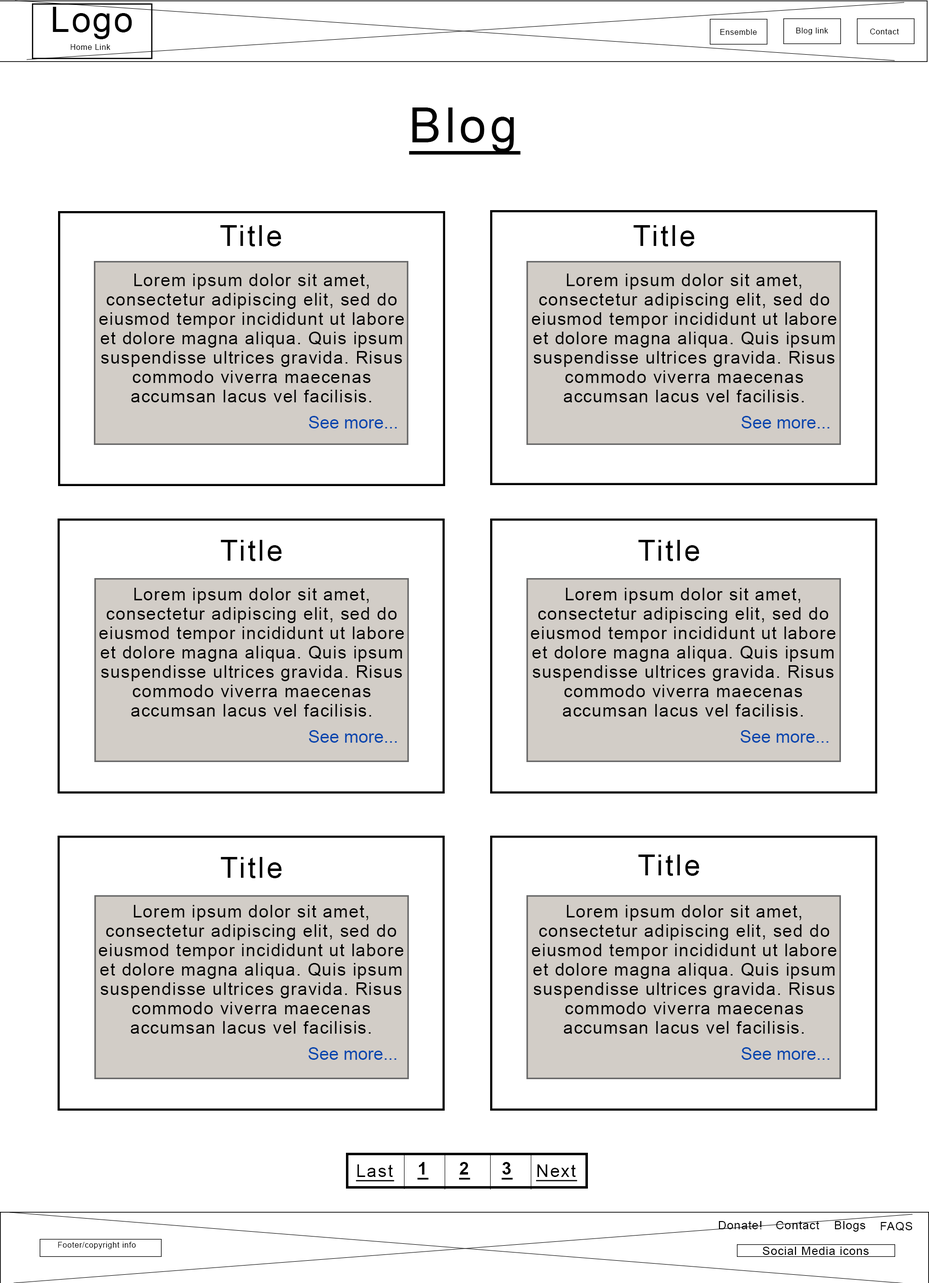
<style>
.page{position:relative;width:929px;height:1283px;background:#ffffff}
.page>*{position:absolute;margin:0}
.t1{font:34.9px "ArialMT";letter-spacing:0.05em;color:#000000}
.t2{font:7.7px "ArialMT";letter-spacing:0.05em;color:#000000}
.t3{font:48.4px "ArialMT";letter-spacing:0.075em;color:#000000;text-decoration:underline}
.t4{font:29px "ArialMT";letter-spacing:0.075em;color:#000000}
.t5{font:17.4px/19.4px "ArialMT";letter-spacing:0.05em;color:#000000}
.t6{font:17.4px/19.4px "ArialMT";letter-spacing:0.075em;color:#000000}
.t7{font:17.4px "ArialMT";color:#0645ad}
.t8{font:17.4px "ArialMT";letter-spacing:0.075em;color:#000000;text-decoration:underline}
.t9{font:17.4px "Arial-BoldMT";letter-spacing:0.075em;color:#000000;text-decoration:underline}
.t10{font:11.6px "ArialMT";letter-spacing:0.05em;color:#000000}
</style>
<div class="page">
<p class="t1" style="left:53px;top:7px;width:79px;height:32px">Logo</p>
<p class="t2" style="left:720px;top:29px;width:37px;height:6px">Ensemble</p>
<p class="t2" style="left:796px;top:28px;width:33px;height:7px">Blog link</p>
<p class="t2" style="left:870px;top:29px;width:29px;height:5px">Contact</p>
<p class="t2" style="left:71px;top:44px;width:39px;height:6px">Home Link</p>
<p class="t3" style="left:409px;top:107px;width:112px;height:48px">Blog</p>
<p class="t4" style="left:220px;top:225px;width:61px;height:21px">Title</p>
<p class="t4" style="left:634px;top:225px;width:61px;height:21px">Title</p>
<p class="t5" style="left:99px;top:274px;width:305px;height:128px;text-align:center">Lorem ipsum dolor sit amet, consectetur adipiscing elit, sed do eiusmod tempor incididunt ut labore et dolore magna aliqua. Quis ipsum suspendisse ultrices gravida. Risus commodo viverra maecenas accumsan lacus vel facilisis<span class="t6">.</span></p>
<p class="t5" style="left:532px;top:274px;width:305px;height:128px;text-align:center">Lorem ipsum dolor sit amet, consectetur adipiscing elit, sed do eiusmod tempor incididunt ut labore et dolore magna aliqua. Quis ipsum suspendisse ultrices gravida. Risus commodo viverra maecenas accumsan lacus vel facilisis<span class="t6">.</span></p>
<p class="t7" style="left:309px;top:416px;width:88px;height:12px">See more...</p>
<p class="t7" style="left:742px;top:416px;width:88px;height:12px">See more...</p>
<p class="t4" style="left:221px;top:540px;width:61px;height:21px">Title</p>
<p class="t4" style="left:639px;top:540px;width:61px;height:21px">Title</p>
<p class="t5" style="left:99px;top:588px;width:305px;height:128px;text-align:center">Lorem ipsum dolor sit amet, consectetur adipiscing elit, sed do eiusmod tempor incididunt ut labore et dolore magna aliqua. Quis ipsum suspendisse ultrices gravida. Risus commodo viverra maecenas accumsan lacus vel facilisis<span class="t6">.</span></p>
<p class="t5" style="left:531px;top:588px;width:305px;height:128px;text-align:center">Lorem ipsum dolor sit amet, consectetur adipiscing elit, sed do eiusmod tempor incididunt ut labore et dolore magna aliqua. Quis ipsum suspendisse ultrices gravida. Risus commodo viverra maecenas accumsan lacus vel facilisis<span class="t6">.</span></p>
<p class="t7" style="left:309px;top:730px;width:88px;height:13px">See more...</p>
<p class="t7" style="left:741px;top:730px;width:88px;height:13px">See more...</p>
<p class="t4" style="left:221px;top:857px;width:61px;height:21px">Title</p>
<p class="t4" style="left:639px;top:854px;width:61px;height:22px">Title</p>
<p class="t5" style="left:99px;top:905px;width:305px;height:129px;text-align:center">Lorem ipsum dolor sit amet, consectetur adipiscing elit, sed do eiusmod tempor incididunt ut labore et dolore magna aliqua. Quis ipsum suspendisse ultrices gravida. Risus commodo viverra maecenas accumsan lacus vel facilisis<span class="t6">.</span></p>
<p class="t5" style="left:532px;top:905px;width:305px;height:129px;text-align:center">Lorem ipsum dolor sit amet, consectetur adipiscing elit, sed do eiusmod tempor incididunt ut labore et dolore magna aliqua. Quis ipsum suspendisse ultrices gravida. Risus commodo viverra maecenas accumsan lacus vel facilisis<span class="t6">.</span></p>
<p class="t7" style="left:308px;top:1047px;width:88px;height:13px">See more...</p>
<p class="t7" style="left:742px;top:1047px;width:88px;height:13px">See more...</p>
<p class="t8" style="left:356px;top:1164px;width:39px;height:17px">Last</p>
<p class="t9" style="left:417px;top:1162px;width:12px;height:18px">1</p>
<p class="t9" style="left:459px;top:1162px;width:12px;height:18px">2</p>
<p class="t9" style="left:502px;top:1162px;width:11px;height:18px">3</p>
<p class="t8" style="left:536px;top:1164px;width:42px;height:17px">Next</p>
<p class="t10" style="left:719px;top:1220px;width:43px;height:9px">Donate!</p>
<p class="t10" style="left:777px;top:1220px;width:43px;height:9px">Contact</p>
<p class="t10" style="left:835px;top:1221px;width:31px;height:11px">Blogs</p>
<p class="t10" style="left:881px;top:1222px;width:32px;height:9px">FAQS</p>
<p class="t2" style="left:58px;top:1242px;width:78px;height:7px">Footer/copyright info</p>
<p class="t10" style="left:763px;top:1247px;width:106px;height:8px">Social Media icons</p>
</div>
